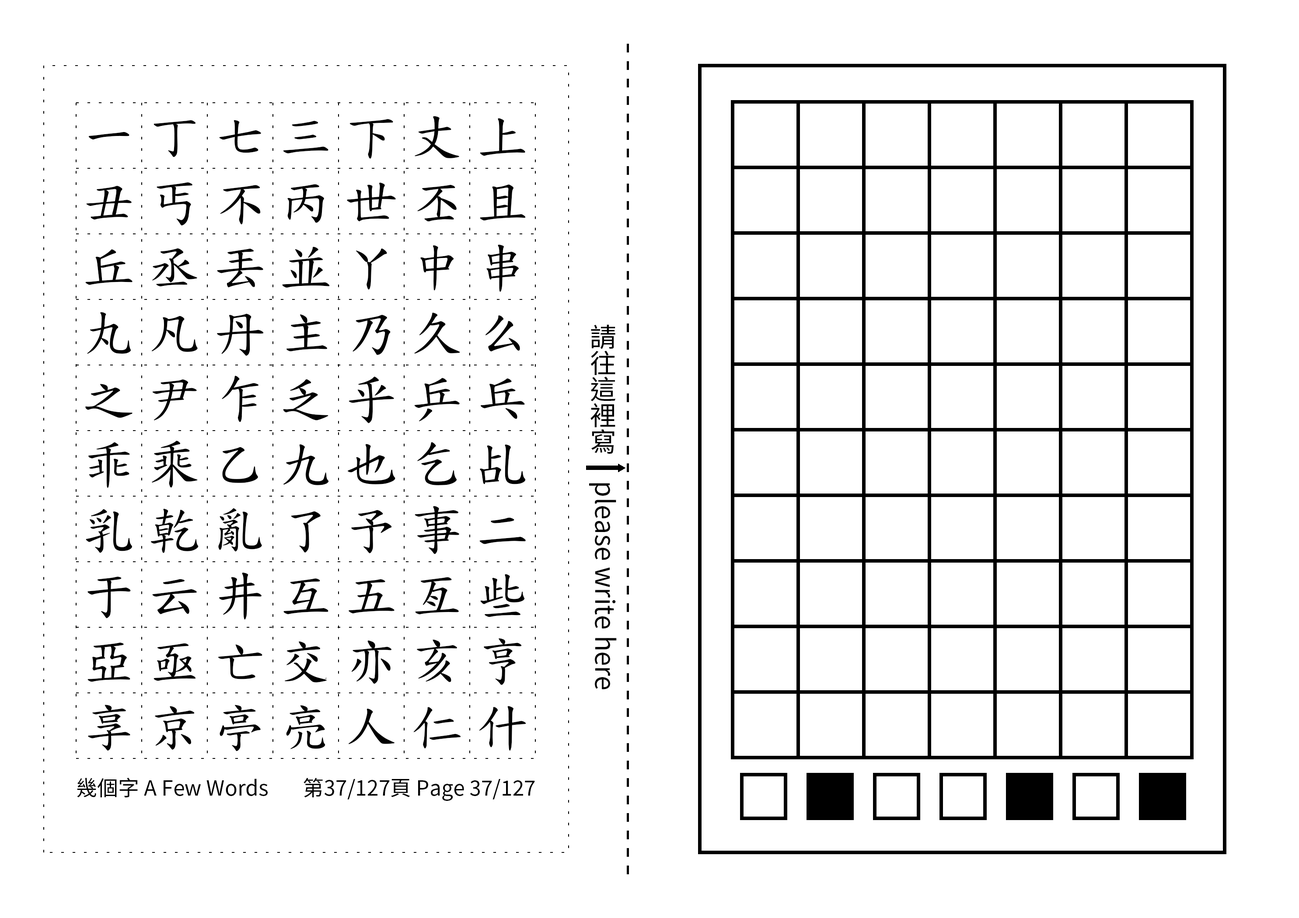
<style>
.page{position:relative;width:1299px;height:918px;background:#ffffff}
.page>*{position:absolute;margin:0}
.t1{font:52.5px/65.6px "TW-Kai-98_1";letter-spacing:0.25em;color:#000000}
.t2{font:26.2px "SourceHanSansTC-Regular";color:#000000}
.t3{font:21px "SourceHanSansTC-Regular";color:#000000}
</style>
<div class="page">
<p class="t1" style="left:85px;top:116px;width:441px;height:636px;text-align:center">一丁七三下丈上丑丐不丙世丕且丘丞丟並丫中串丸凡丹主乃久么之尹乍乏乎乒乓乖乘乙九也乞乩乳乾亂了予事二于云井互五亙些亞亟亡交亦亥亨享京亭亮人仁什</p>
<p class="t2" style="left:589px;top:324px;width:28px;height:366px;text-align:center">請往這裡寫　please write here</p>
<p class="t3" style="left:77px;top:778px;width:191px;height:20px">幾個字 A Few Words</p>
<p class="t3" style="left:303px;top:778px;width:232px;height:23px">第37/127頁 Page 37/127</p>
</div>
